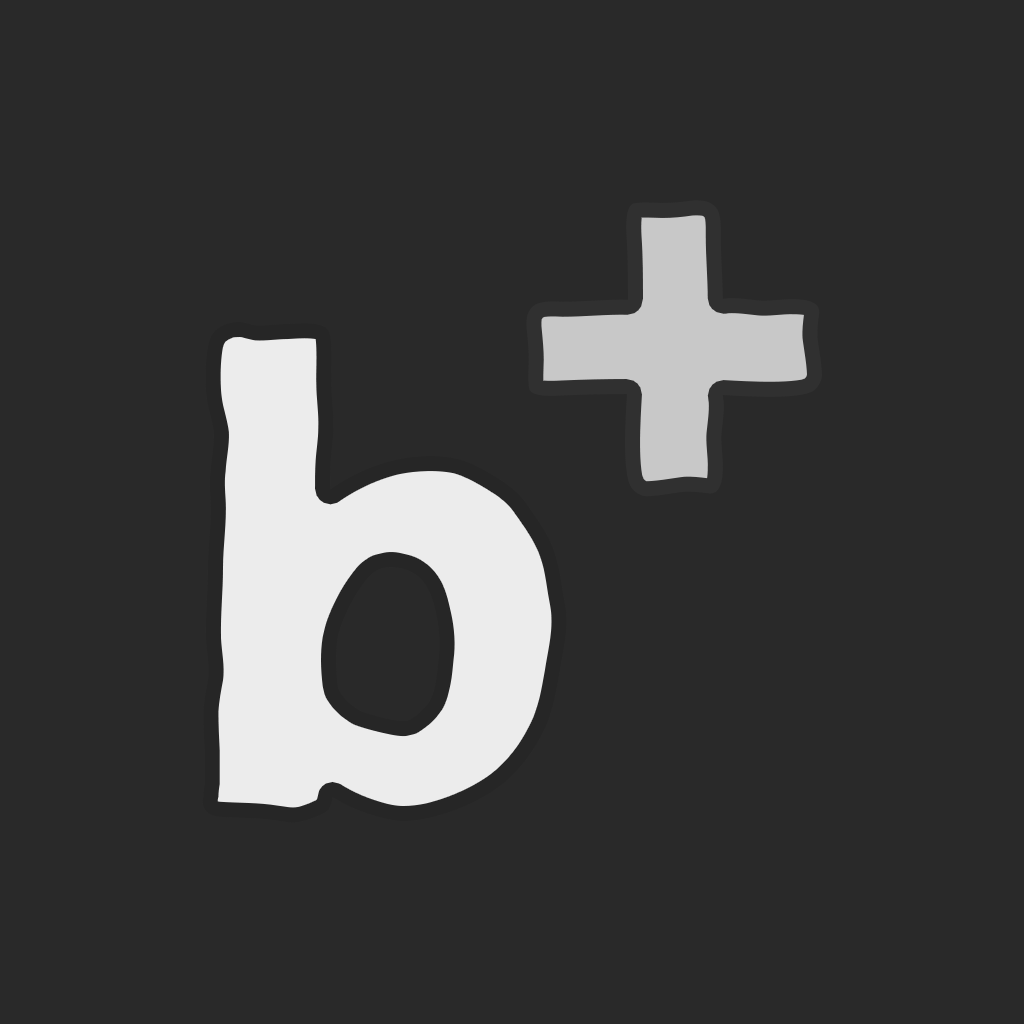
<style>
.page{position:relative;width:1024px;height:1024px;background:#292929}
.page>*{position:absolute;margin:0}
.t1{font:496.2px "TasteBread"}
.t2{font:654.9px "TasteBread";color:#ececec}
</style>
<div class="page">
<p class="t1" style="left:526px;top:200px;width:296px;height:297px">+</p>
<p class="t2" style="left:202px;top:322px;width:365px;height:501px">b</p>
</div>
